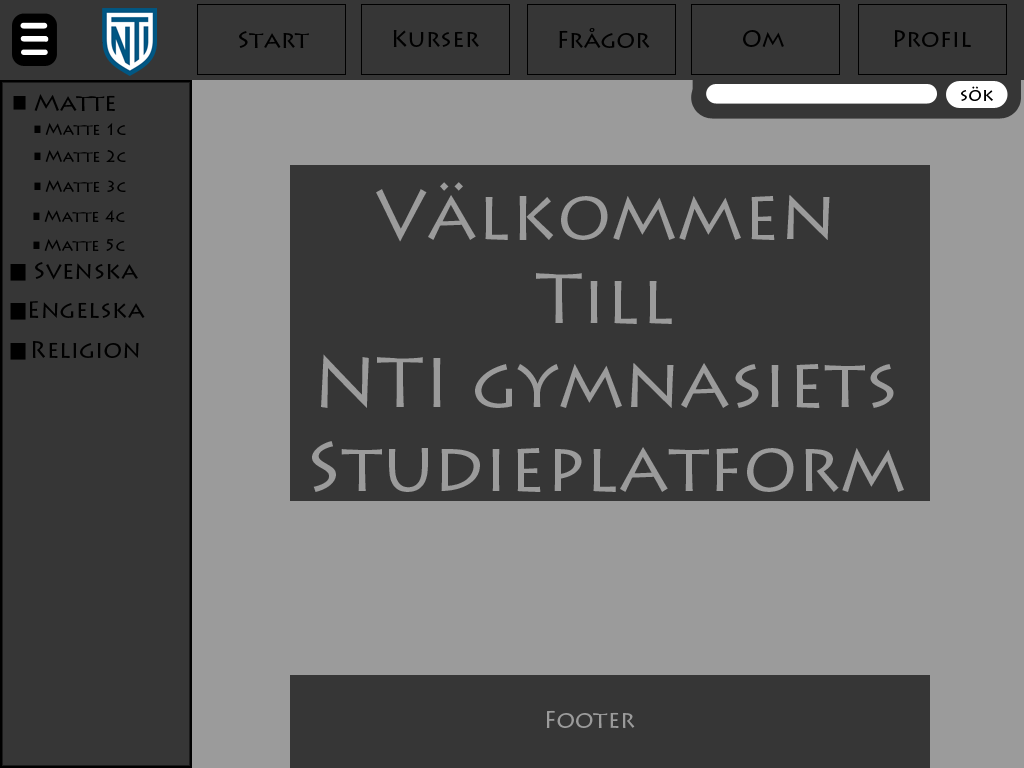
<style>
.page{position:relative;width:1024px;height:768px;background:#363636}
.page>*{position:absolute;margin:0}
.t1{font:24px "LithosPro-Regular";color:#000000}
.t2{font:18px "LithosPro-Regular";color:#000000}
.t3{font:16px "LithosPro-Regular";color:#000000}
.t4{font:70px "LithosPro-Regular";color:#9b9b9b}
.t5{font:24px "LithosPro-Regular";color:#9b9b9b}
</style>
<div class="page">
<p class="t1" style="left:393px;top:30px;width:86px;height:17px">Kurser</p>
<p class="t1" style="left:559px;top:28px;width:91px;height:20px">Frågor</p>
<p class="t1" style="left:743px;top:30px;width:41px;height:17px">Om</p>
<p class="t1" style="left:894px;top:30px;width:77px;height:17px">Profil</p>
<p class="t1" style="left:239px;top:31px;width:70px;height:17px">Start</p>
<p class="t2" style="left:961px;top:86px;width:32px;height:15px">sök</p>
<p class="t1" style="left:34px;top:94px;width:81px;height:17px">Matte</p>
<p class="t3" style="left:45px;top:123px;width:81px;height:12px">Matte 1c</p>
<p class="t3" style="left:45px;top:150px;width:81px;height:12px">Matte 2c</p>
<p class="t3" style="left:45px;top:180px;width:81px;height:12px">Matte 3c</p>
<p class="t4" style="left:312px;top:182px;width:592px;height:310px;text-align:center">Välkommen<br>Till<br>NTI gymnasiets<br>Studieplatform</p>
<p class="t3" style="left:44px;top:210px;width:81px;height:12px">Matte 4c</p>
<p class="t3" style="left:44px;top:239px;width:81px;height:12px">Matte 5c</p>
<p class="t1" style="left:35px;top:262px;width:103px;height:18px">Svenska</p>
<p class="t1" style="left:30px;top:301px;width:115px;height:17px">Engelska</p>
<p class="t5" style="left:546px;top:710px;width:89px;height:18px">Footer</p>
</div>
